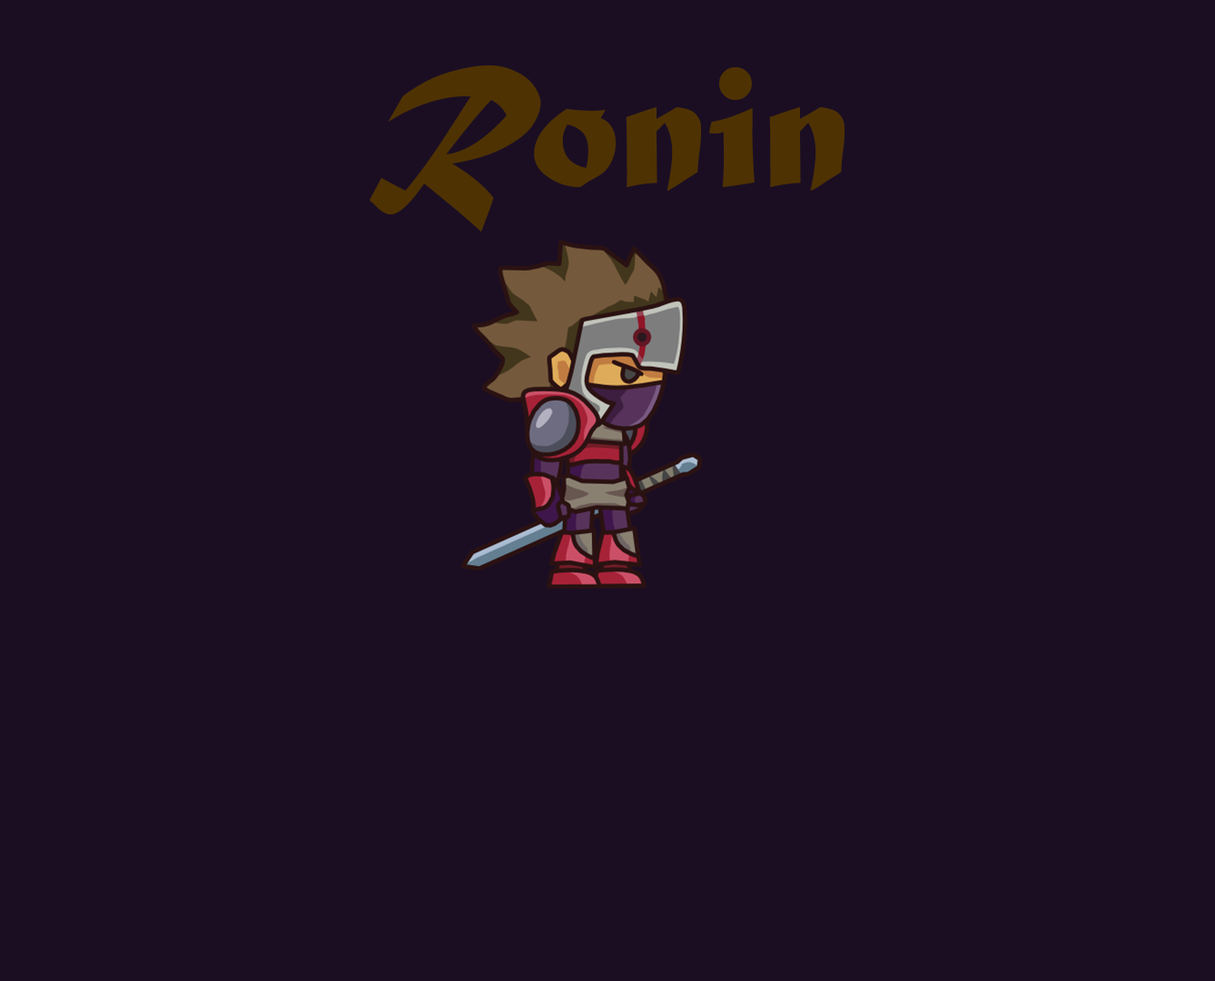
<style>
.page{position:relative;width:1215px;height:981px;background:#1b0e23}
.page>*{position:absolute;margin:0}
.t1{font:181.7px "MaturaMTScriptCapitals";color:#4e3201}
.t2{font:127.2px "MaturaMTScriptCapitals";color:#000000}
</style>
<div class="page">
<p class="t1" style="left:369px;top:65px;width:477px;height:167px"><span class="t2"><br></span>Ronin</p>
</div>
